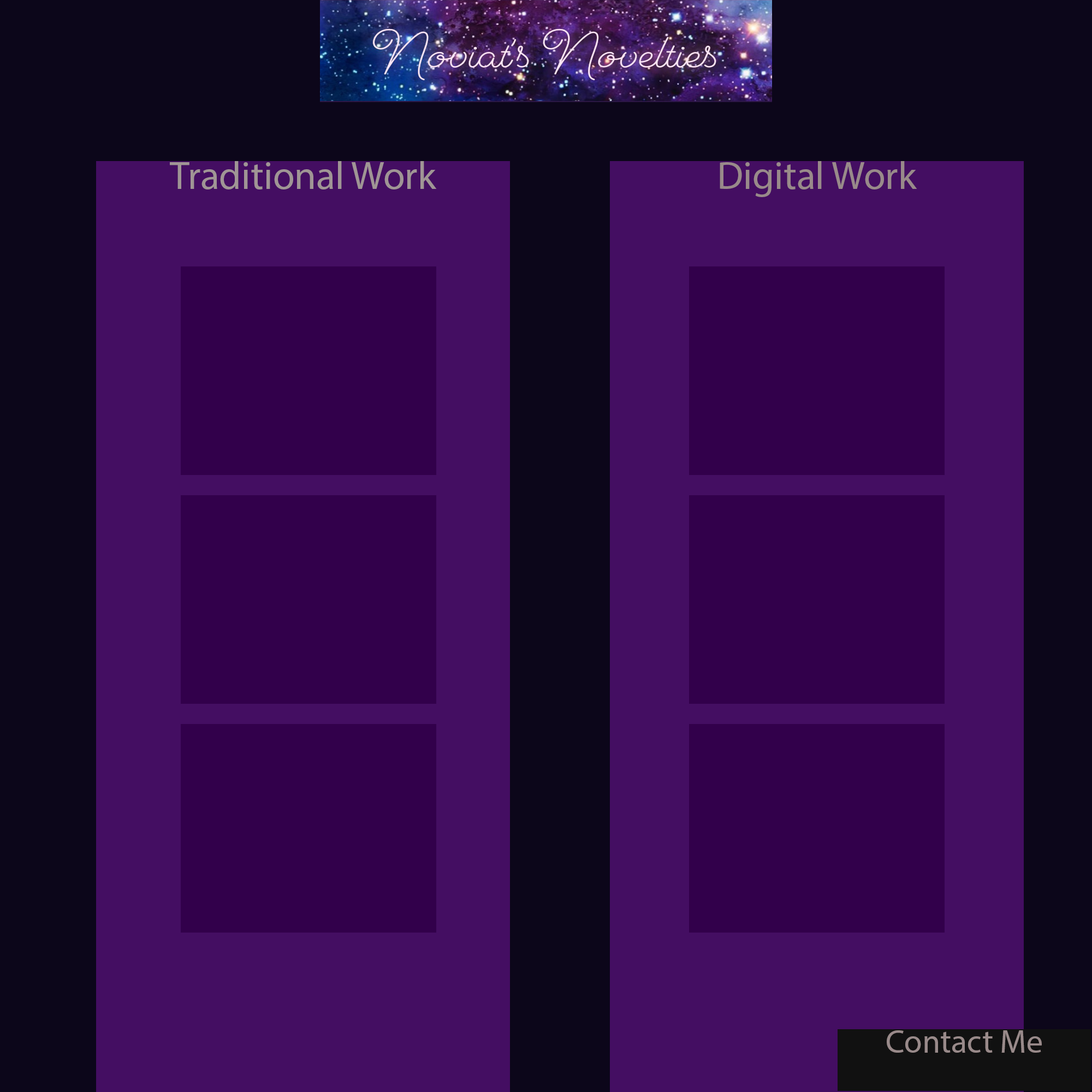
<style>
.page{position:relative;width:1092px;height:1092px;background:#440e62}
.page>*{position:absolute;margin:0}
.t1{font:39.3px "MyriadPro-Regular";color:#a09595}
.t2{font:39.3px "MyriadPro-Regular";color:#998a8a}
.t3{font:32.8px "MyriadPro-Regular";color:#998a8a}
</style>
<div class="page">
<p class="t1" style="left:170px;top:161px;width:267px;height:28px">Traditional Work</p>
<p class="t2" style="left:720px;top:161px;width:197px;height:36px">Digital Work</p>
<p class="t3" style="left:887px;top:1030px;width:155px;height:23px">Contact Me</p>
</div>
